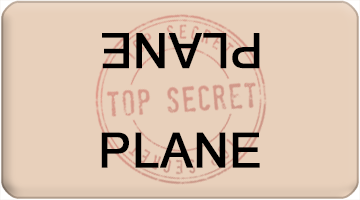
<style>
.page{position:relative;width:360px;height:200px;background:#e8d0bb}
.page>*{position:absolute;margin:0}
.t1{font:48px "ArialMT";color:#000000;font-weight:bold}
</style>
<div class="page">
<p class="t1" style="left:102px;top:33px;width:158px;height:36px;rotate:180deg">PLANE</p>
<p class="t1" style="left:101px;top:132px;width:159px;height:36px">PLANE</p>
</div>
